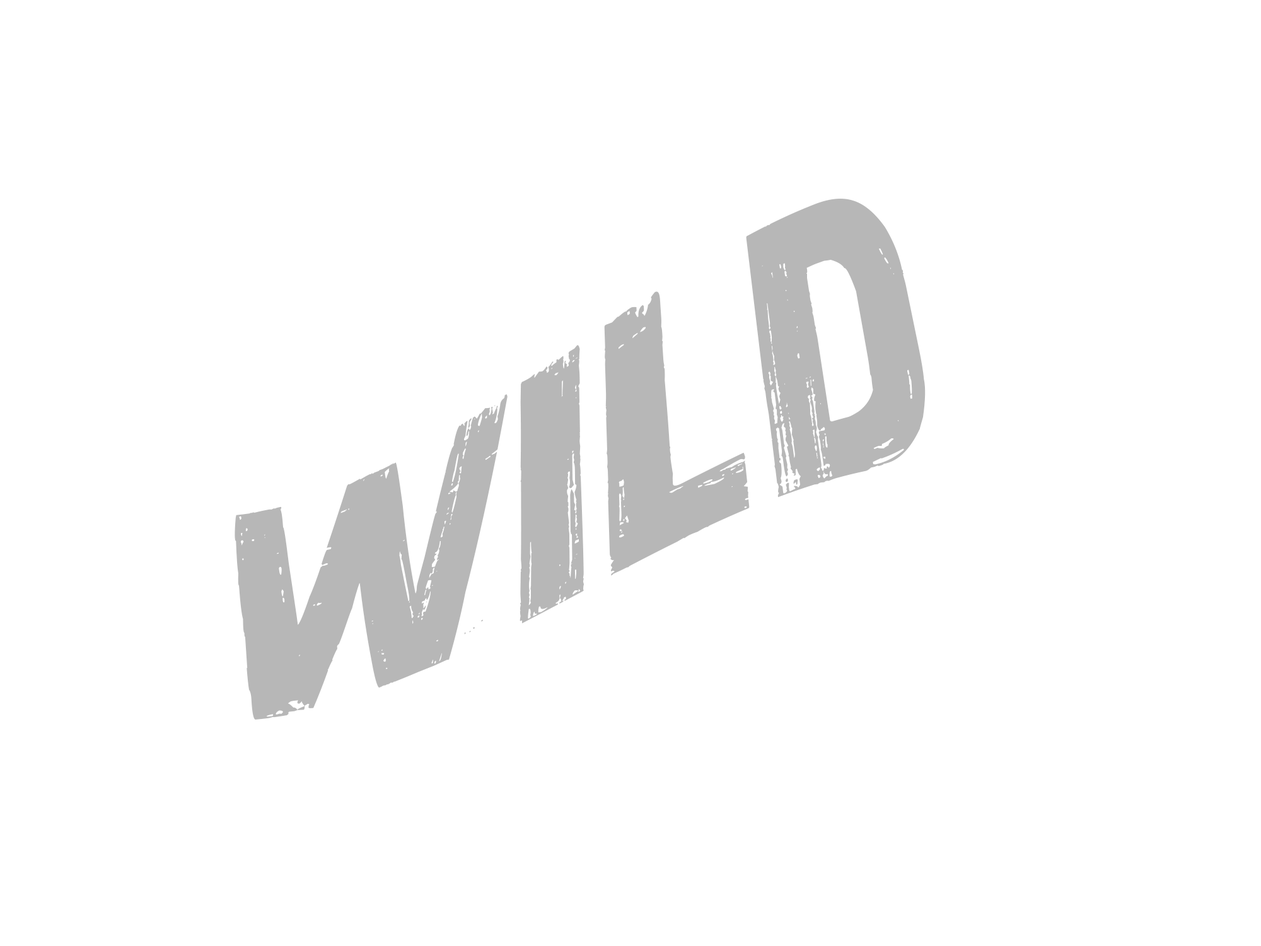
<style>
.page{position:relative;width:1261px;height:946px;background:#ffffff}
.page>*{position:absolute;margin:0}
.t1{font:262.7px "PersonalServices";color:#b7b7b7}
</style>
<div class="page">
<p class="t1" style="left:235px;top:199px;width:691px;height:520px;text-align:center">WILD</p>
</div>
